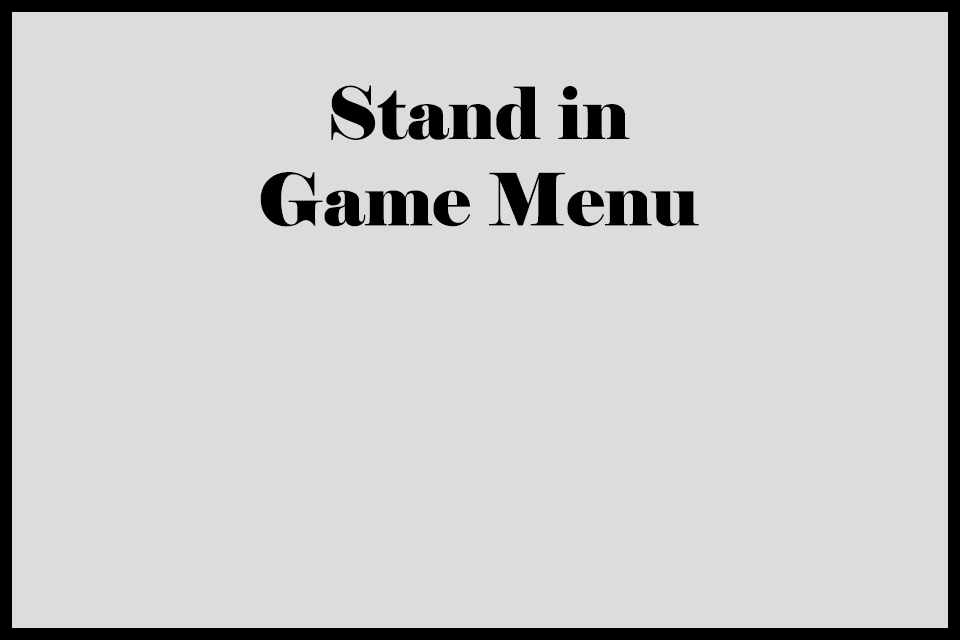
<style>
.page{position:relative;width:960px;height:640px;background:#dcdcdc}
.page>*{position:absolute;margin:0}
.t1{font:72px "Elephant-Regular";color:#000000}
</style>
<div class="page">
<p class="t1" style="left:260px;top:85px;width:439px;height:142px;text-align:center">Stand in<br>Game Menu</p>
</div>
